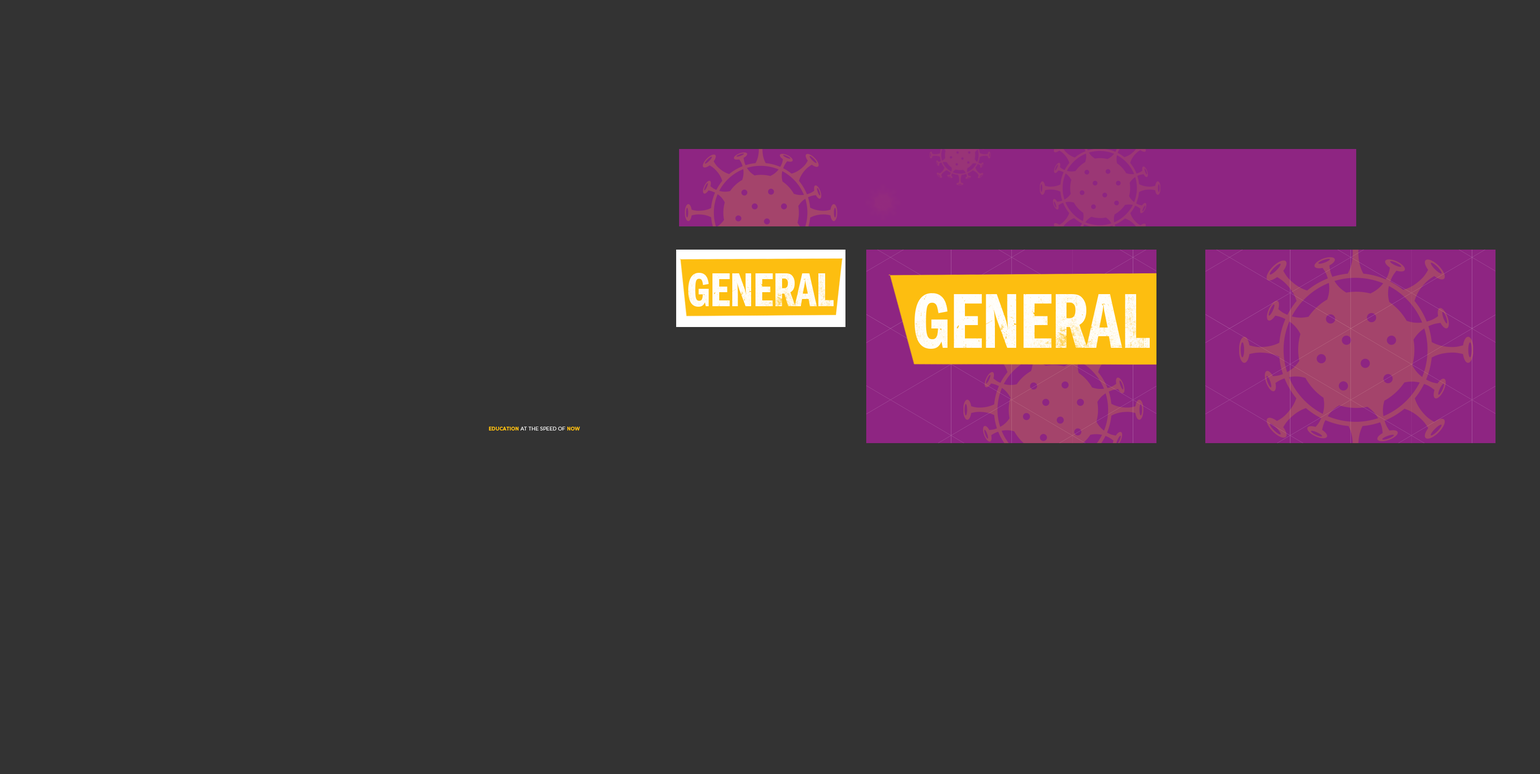
<style>
.page{position:relative;width:1540px;height:774px;background:#333333}
.page>*{position:absolute;margin:0}
.t1{font:49.6px "ITCFranklinGothicStd-DmCp";letter-spacing:-0.01em;color:#ffffff}
.t2{font:80.3px "ITCFranklinGothicStd-DmCp";letter-spacing:-0.01em;color:#ffffff}
</style>
<div class="page">
<p class="t1" style="left:688px;top:273px;width:146px;height:34px">GENERAL</p>
<p class="t2" style="left:915px;top:293px;width:235px;height:56px">GENERAL</p>
</div>
